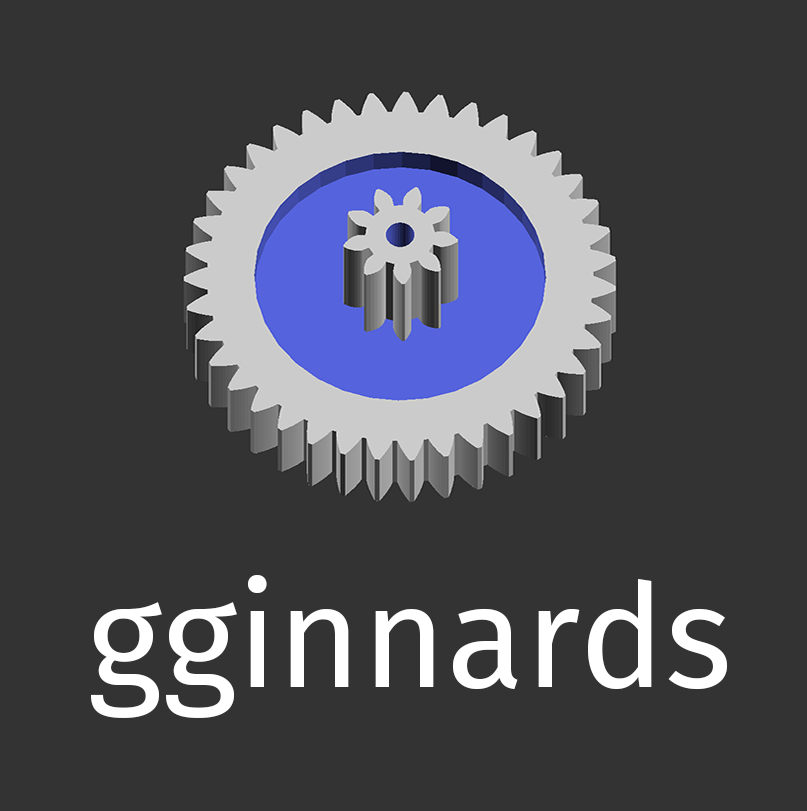
<style>
.page{position:relative;width:807px;height:811px;background:#333333}
.page>*{position:absolute;margin:0}
.t1{font:144px "FiraSans-Regular";color:#ffffff}
</style>
<div class="page">
<p class="t1" style="left:91px;top:575px;width:636px;height:143px">gginnards</p>
</div>
